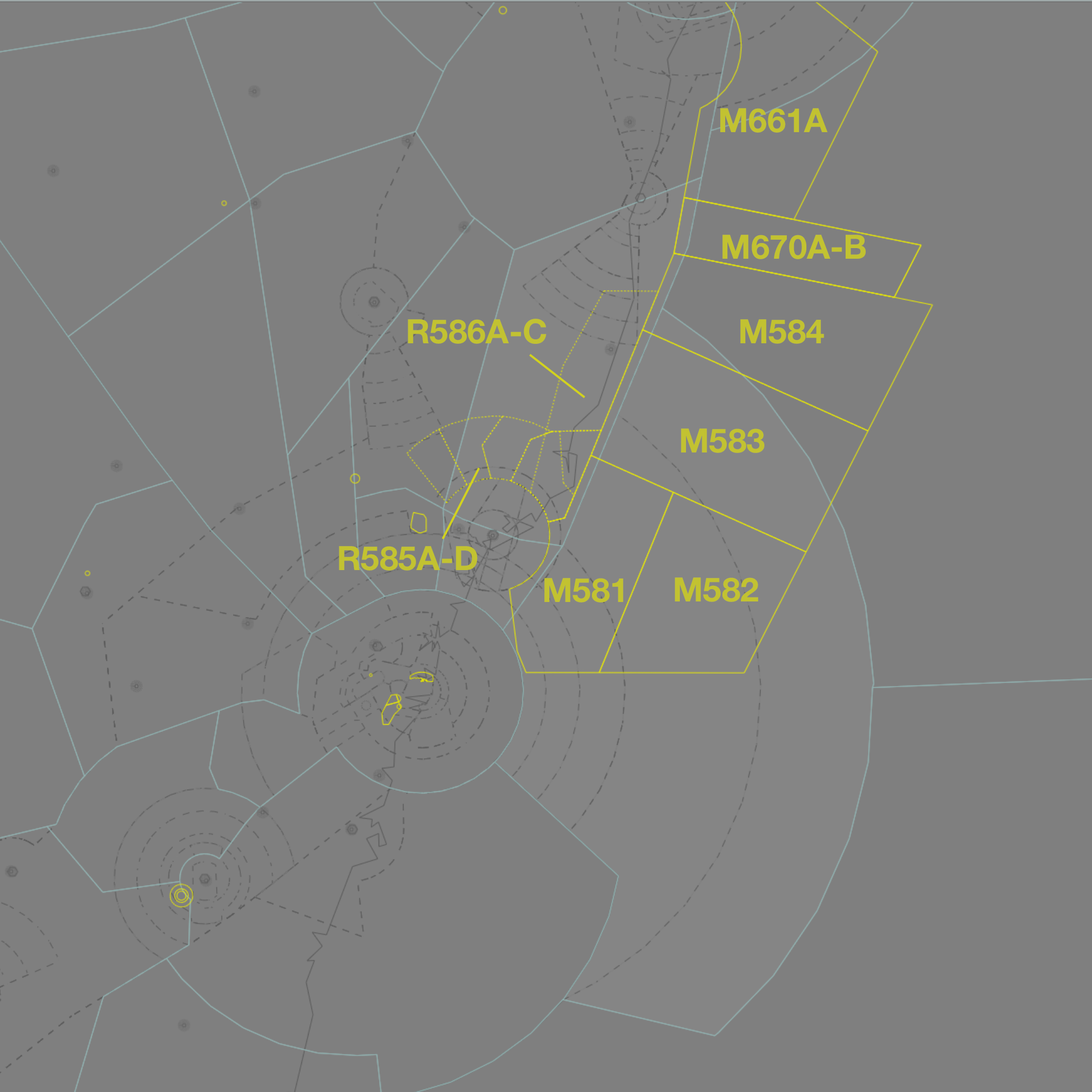
<style>
.page{position:relative;width:1092px;height:1092px;background:#7f7f7f}
.page>*{position:absolute;margin:0}
.t1{font:33.6px "HelveticaNeue-Bold";color:#c2c231}
</style>
<div class="page">
<p class="t1" style="left:720px;top:108px;width:108px;height:25px">M661A</p>
<p class="t1" style="left:722px;top:235px;width:144px;height:24px">M670A-B</p>
<p class="t1" style="left:408px;top:319px;width:139px;height:25px">R586A-C</p>
<p class="t1" style="left:740px;top:319px;width:84px;height:25px">M584</p>
<p class="t1" style="left:681px;top:428px;width:83px;height:25px">M583</p>
<p class="t1" style="left:339px;top:546px;width:139px;height:25px">R585A-D</p>
<p class="t1" style="left:544px;top:578px;width:79px;height:25px">M581</p>
<p class="t1" style="left:675px;top:577px;width:83px;height:25px">M582</p>
</div>
